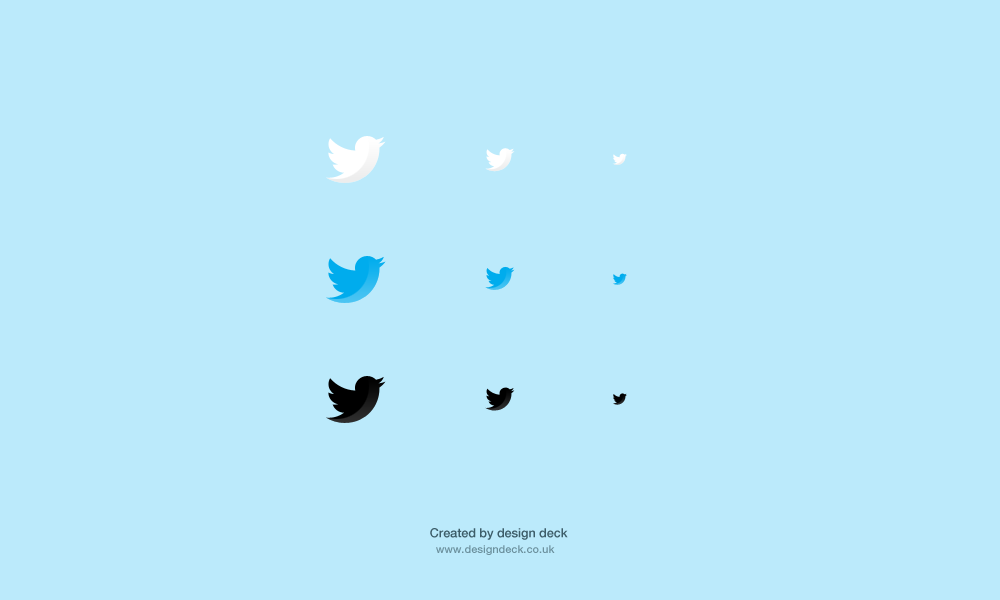
<style>
.page{position:relative;width:1000px;height:600px;background:#bbeafb}
.page>*{position:absolute;margin:0}
.t1{font:12.5px "HelveticaNeue-Medium";color:#3d5d69}
.t2{font:11px "HelveticaNeue-Medium";color:#6c919e}
</style>
<div class="page">
<p class="t1" style="left:430px;top:528px;width:138px;height:12px">Created by design deck</p>
<p class="t2" style="left:436px;top:545px;width:119px;height:10px">www.designdeck.co.uk</p>
</div>
